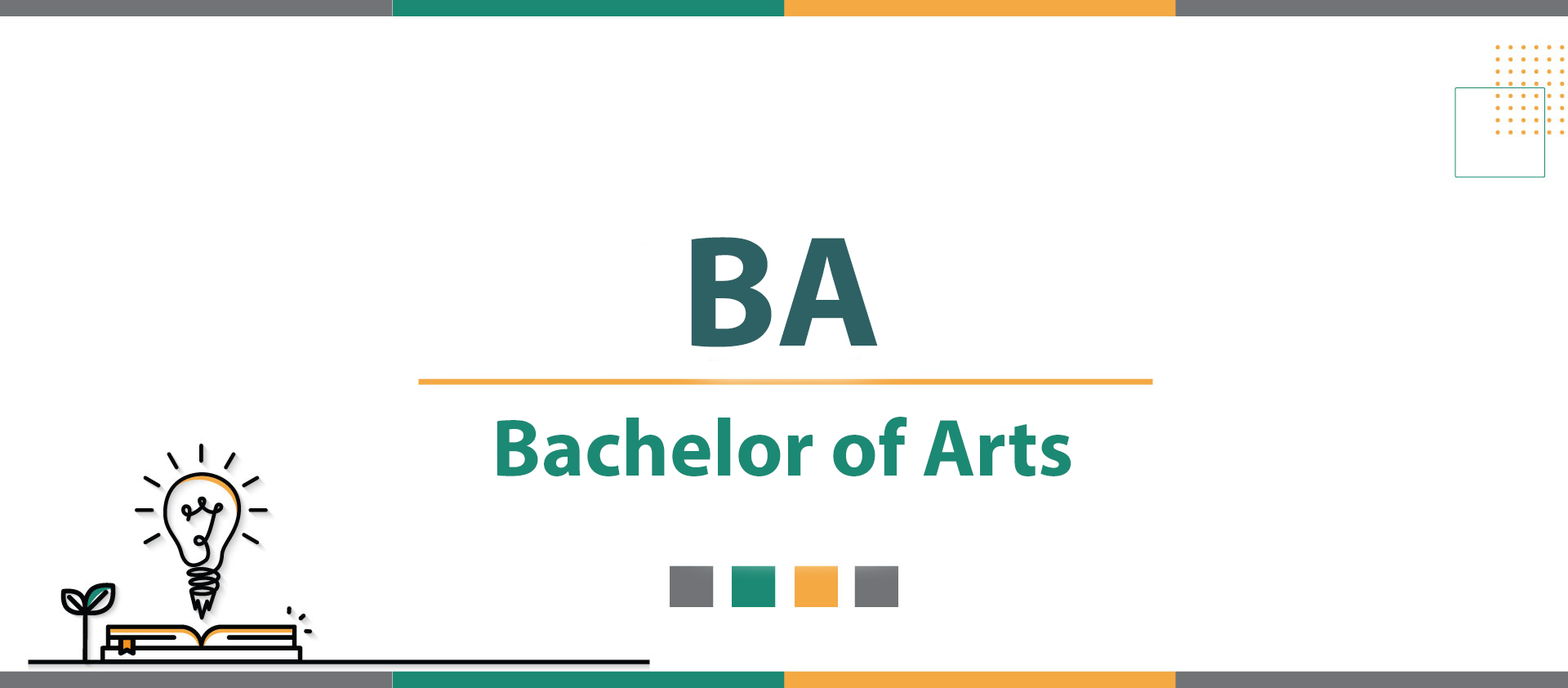
<style>
.page{position:relative;width:1568px;height:688px;background:#ffffff}
.page>*{position:absolute;margin:0}
.t1{font:159.2px "MyriadPro-Bold";color:#2e6164}
.t2{font:81.7px "MyriadPro-Bold";color:#1c8974}
</style>
<div class="page">
<p class="t1" style="left:691px;top:237px;width:187px;height:110px">BA</p>
<p class="t2" style="left:497px;top:416px;width:574px;height:60px">Bachelor of Arts</p>
</div>
